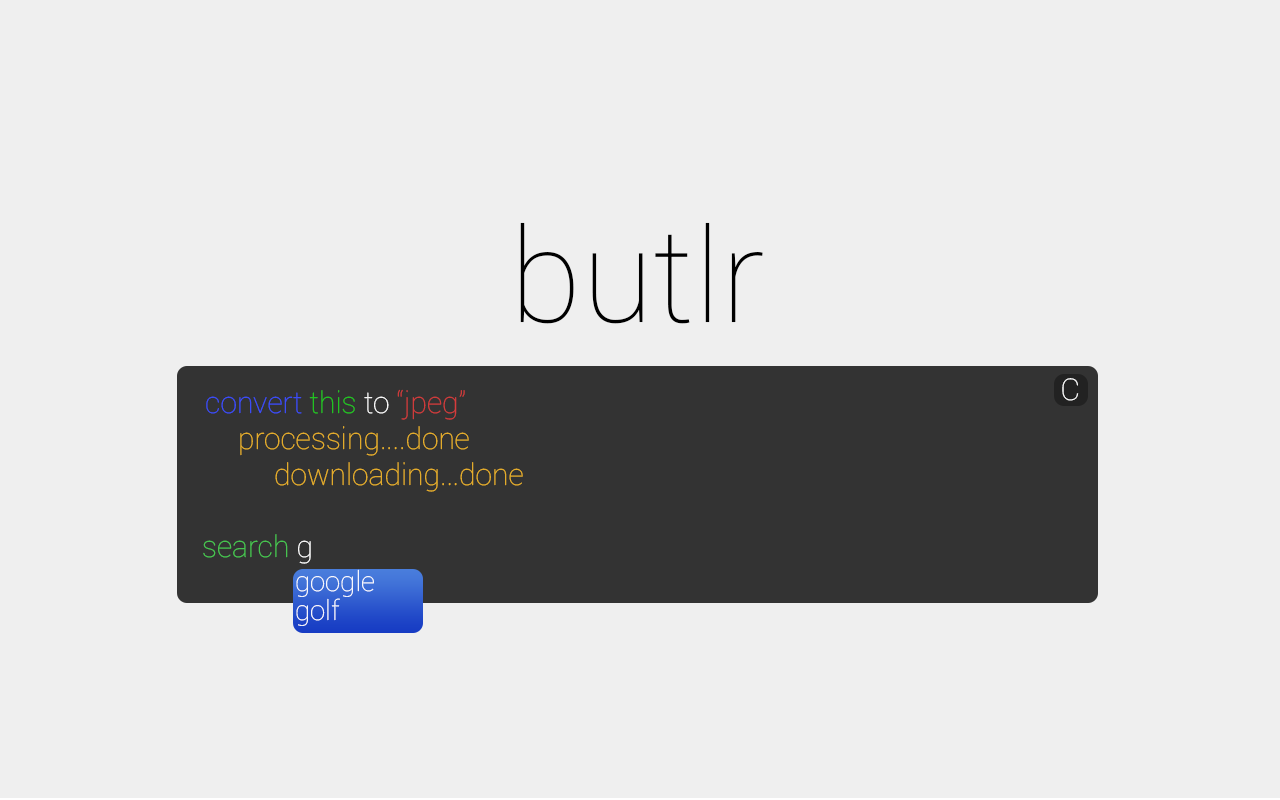
<style>
.page{position:relative;width:1280px;height:800px;background:#efefef}
.page>*{position:absolute;margin:0}
.t1{font:130px "Roboto-Thin";color:#000000}
.t2{font:30px "Roboto-Thin";color:#ebb22a}
.t3{font:30px "Roboto-Thin";color:#3c4eff}
.t4{font:30px "Roboto-Thin";color:#20ca20}
.t5{font:30px "Roboto-Thin";color:#ffffff}
.t6{font:30px "Roboto-Thin";color:#d63c3c}
.t7{font:30px "Roboto-Thin";color:#48cb52}
.t8{font:12px "Roboto-Thin";color:#ffffff}
.t9{font:27.5px "Roboto-Thin";color:#ffffff}
</style>
<div class="page">
<p class="t1" style="left:520px;top:222px;width:243px;height:102px">butlr</p>
<p class="t2" style="left:203px;top:389px;width:320px;height:175px"><span class="t3">convert </span><span class="t4">this </span><span class="t5">to </span><span class="t6">“jpeg”<br> </span>processing....done<br>  downloading...done<br><br><span class="t7">search </span><span class="t5">g</span></p>
<p class="t8" style="left:1062px;top:378px;width:17px;height:23px">C</p>
<p class="t9" style="left:296px;top:569px;width:78px;height:28px">google</p>
<p class="t9" style="left:296px;top:598px;width:44px;height:28px">golf</p>
</div>
